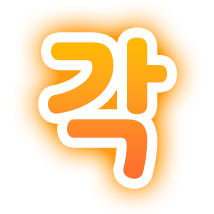
<style>
.page{position:relative;width:214px;height:214px;background:#ffffff}
.page>*{position:absolute;margin:0}
.t1{font:146.7px "Binggrae-Bold";text-transform:uppercase;scale:0.91 1}
</style>
<div class="page">
<p class="t1" style="left:48px;top:37px;width:120px;height:142px">각</p>
</div>
